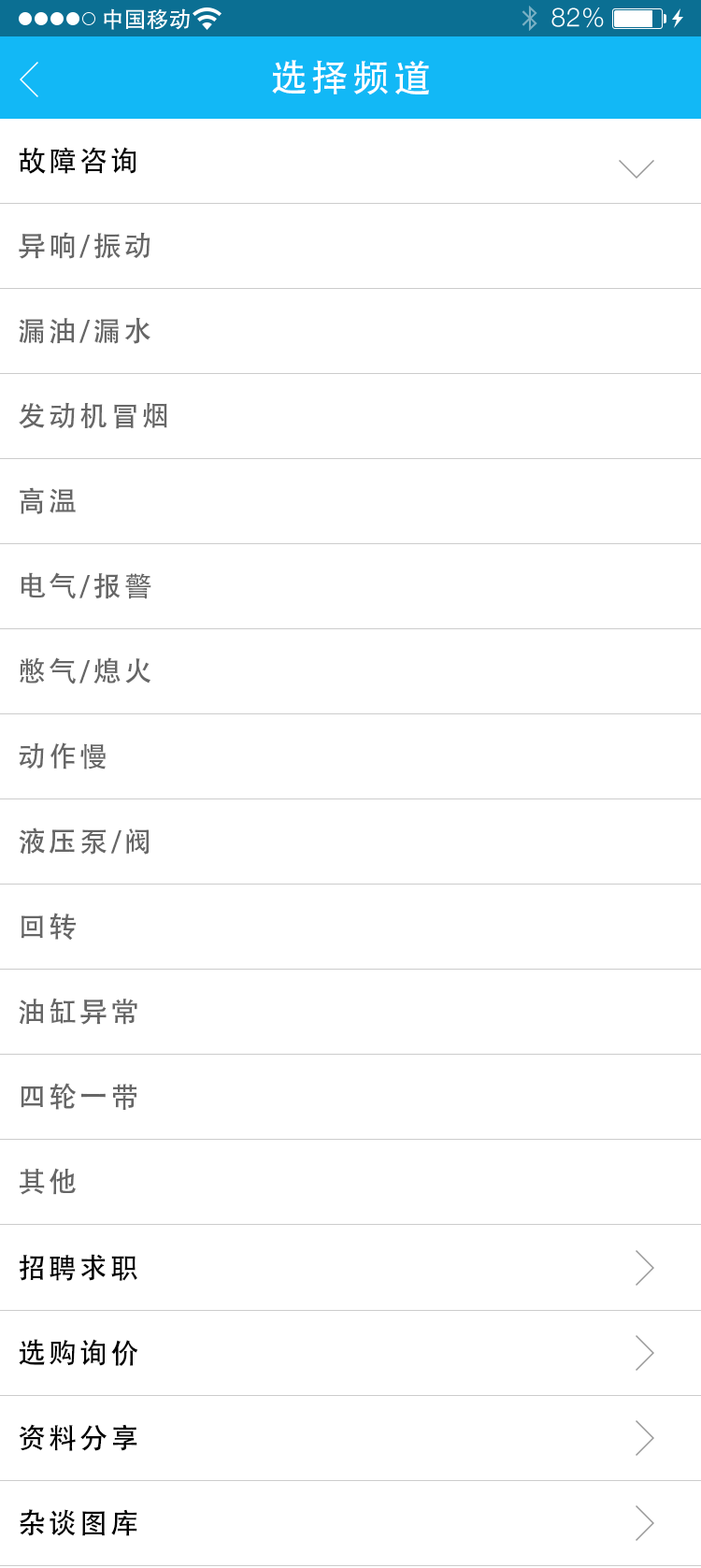
<style>
.page{position:relative;width:701px;height:1568px;background:#ffffff}
.page>*{position:absolute;margin:0}
.t1{font:37.4px "AdobeHeitiStd-Regular";letter-spacing:0.104em;color:#ffffff}
.t2{font:28.1px "AdobeHeitiStd-Regular";letter-spacing:0.104em;color:#000000}
.t3{font:28.1px "AdobeHeitiStd-Regular";letter-spacing:0.104em;color:#666666}
</style>
<div class="page">
<p class="t1" style="left:272px;top:60px;width:157px;height:35px">选择频道</p>
<p class="t2" style="left:19px;top:147px;width:118px;height:27px">故障咨询</p>
<p class="t3" style="left:19px;top:232px;width:132px;height:27px">异响/振动</p>
<p class="t3" style="left:19px;top:317px;width:132px;height:27px">漏油/漏水</p>
<p class="t3" style="left:19px;top:402px;width:148px;height:27px">发动机冒烟</p>
<p class="t3" style="left:20px;top:487px;width:56px;height:27px">高温</p>
<p class="t3" style="left:21px;top:572px;width:130px;height:27px">电气/报警</p>
<p class="t3" style="left:20px;top:657px;width:131px;height:27px">憋气/熄火</p>
<p class="t3" style="left:19px;top:742px;width:87px;height:28px">动作慢</p>
<p class="t3" style="left:19px;top:827px;width:130px;height:28px">液压泵/阀</p>
<p class="t3" style="left:21px;top:913px;width:55px;height:28px">回转</p>
<p class="t3" style="left:19px;top:998px;width:118px;height:27px">油缸异常</p>
<p class="t3" style="left:21px;top:1083px;width:116px;height:27px">四轮一带</p>
<p class="t3" style="left:19px;top:1168px;width:57px;height:27px">其他</p>
<p class="t2" style="left:19px;top:1254px;width:118px;height:27px">招聘求职</p>
<p class="t2" style="left:19px;top:1339px;width:119px;height:27px">选购询价</p>
<p class="t2" style="left:19px;top:1424px;width:118px;height:27px">资料分享</p>
<p class="t2" style="left:20px;top:1509px;width:117px;height:27px">杂谈图库</p>
</div>
